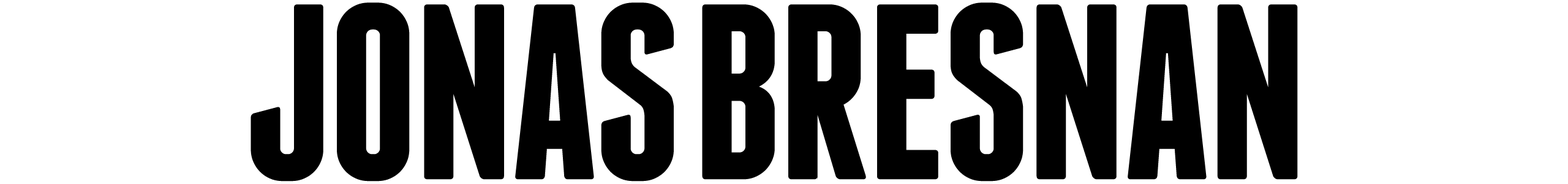
<style>
.page{position:relative;width:1568px;height:184px;background:#ffffff}
.page>*{position:absolute;margin:0}
.t1{font:249.3px "Franchise-Bold";letter-spacing:-0.02em;color:#000000}
</style>
<div class="page">
<p class="t1" style="left:251px;top:2px;width:1047px;height:179px">JONASBRESNAN</p>
</div>
